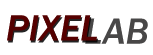
<style>
.page{position:relative;width:153px;height:55px;background:#ffffff}
.page>*{position:absolute;margin:0}
.t1{font:38px "FranklinGothic-MediumItalic";color:#550000}
.t2{font:38px "FranklinGothic-MediumItalic";color:#484747}
</style>
<div class="page">
<p class="t1" style="left:7px;top:15px;width:90px;height:26px">PIXEL</p>
<p class="t2" style="left:85px;top:18px;width:63px;height:26px">LAB</p>
</div>
